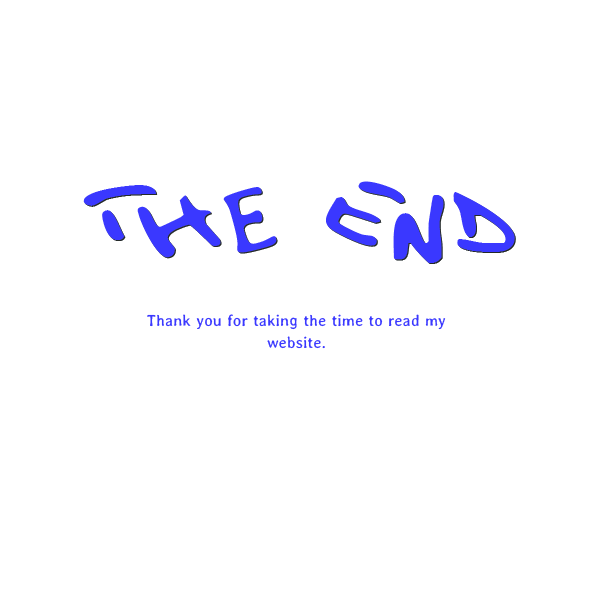
<style>
.page{position:relative;width:600px;height:600px;background:#ffffff}
.page>*{position:absolute;margin:0}
.t1{font:90px "FatboySlimBLTCBRK)";color:#3a38ff}
.t2{font:90px "Averia-Regular";color:#3a38ff}
.t3{font:16px/22px "Averia-Regular";color:#3a38ff}
</style>
<div class="page">
<p class="t1" style="left:83px;top:185px;width:74px;height:55px">T</p>
<p class="t1" style="left:326px;top:181px;width:79px;height:65px;rotate:30deg">E</p>
<p class="t1" style="left:137px;top:195px;width:84px;height:63px;rotate:-15deg">H</p>
<p class="t2" style="left:223px;top:187px;width:54px;height:66px;rotate:-15deg">E</p>
<p class="t1" style="left:393px;top:195px;width:51px;height:68px">N</p>
<p class="t1" style="left:453px;top:192px;width:62px;height:60px">D</p>
<p class="t3" style="left:147px;top:314px;width:299px;height:35px;text-align:center">Thank you for taking the time to read my website.</p>
</div>
